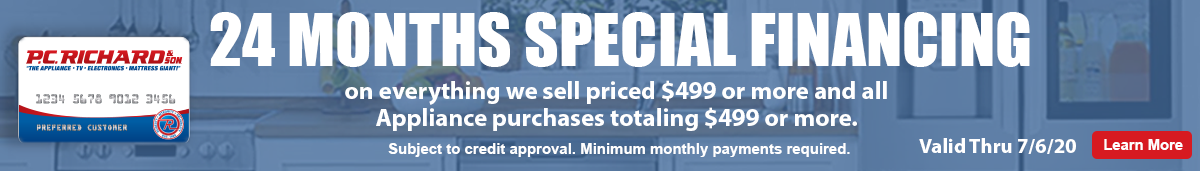
<style>
.page{position:relative;width:1200px;height:171px;background:#ffffff}
.page>*{position:absolute;margin:0}
.t1{font:67.3px "Impact";color:#ffffff}
.t2{font:25px/27px "MyriadPro-Bold";color:#ffffff}
.t3{font:15px "Arial-BoldMT";color:#ffffff}
.t4{font:20.7px "MyriadPro-Bold";color:#ffffff}
.t5{font:14.8px "Arial-BoldMT";color:#ffffff}
</style>
<div class="page">
<p class="t1" style="left:210px;top:12px;width:820px;height:55px">24 MONTHS SPECIAL FINANCING</p>
<p class="t2" style="left:345px;top:80px;width:542px;height:51px;text-align:center">on everything we sell priced $499 or more and all <br>Appliance purchases totaling $499 or more.</p>
<p class="t3" style="left:388px;top:143px;width:462px;height:14px">Subject to credit approval. Minimum monthly payments required.</p>
<p class="t4" style="left:919px;top:138px;width:157px;height:16px">Valid Thru 7/6/20</p>
<p class="t5" style="left:1104px;top:139px;width:79px;height:11px">Learn More</p>
</div>
